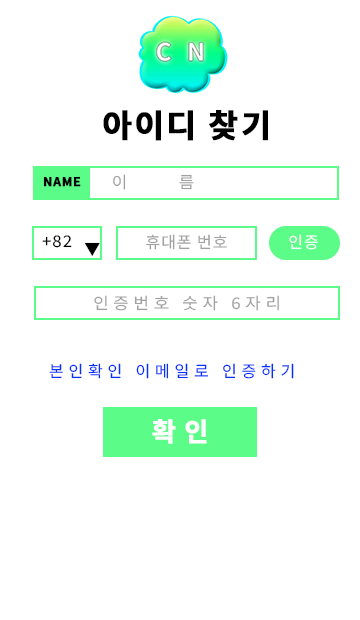
<style>
.page{position:relative;width:360px;height:620px;background:#ffffff}
.page>*{position:absolute;margin:0}
.t1{font:32px "NotoSansKR-Bold";letter-spacing:0.06em;color:#000000;font-weight:bold}
.t2{font:16px "NotoSansKR-Regular";letter-spacing:3.06em;color:#a1a1a1;scale:1.05 1}
.t3{font:12px "NotoSansKR-Bold";letter-spacing:0.06em;color:#000000;text-transform:uppercase;font-weight:bold}
.t4{font:16px "NotoSansKR-Regular";letter-spacing:0.06em;color:#000000;scale:1.05 1}
.t5{font:16px "NotoSansKR-Regular";letter-spacing:0.06em;color:#000000}
.t6{font:16px "NotoSansKR-Regular";letter-spacing:0.06em;color:#a1a1a1}
.t7{font:16px "NotoSansKR-Regular";letter-spacing:0.06em;color:#ffffff}
.t8{font:16px "NotoSansKR-Regular";letter-spacing:0.28em;color:#a1a1a1;scale:1.05 1}
.t9{font:16px "NotoSansKR-Regular";letter-spacing:0.3em;color:#0332fe}
.t10{font:26px "NotoSansKR-Bold";letter-spacing:0.3em;color:#ffffff;font-weight:bold}
</style>
<div class="page">
<p class="t1" style="left:103px;top:110px;width:165px;height:31px">아이디 찾기</p>
<p class="t2" style="left:113px;top:174px;width:81px;height:16px">이름</p>
<p class="t3" style="left:43px;top:176px;width:38px;height:11px">name</p>
<p class="t4" style="left:42px;top:235px;width:30px;height:13px">+82</p>
<p class="t5" style="left:84px;top:242px;width:16px;height:14px">▼</p>
<p class="t6" style="left:146px;top:234px;width:81px;height:16px">휴대폰 번호</p>
<p class="t7" style="left:289px;top:234px;width:29px;height:16px">인증</p>
<p class="t8" style="left:94px;top:295px;width:185px;height:16px">인증번호 숫자 6자리</p>
<p class="t9" style="left:49px;top:363px;width:245px;height:16px">본인확인 이메일로 인증하기</p>
<p class="t10" style="left:152px;top:419px;width:55px;height:25px">확인</p>
</div>
